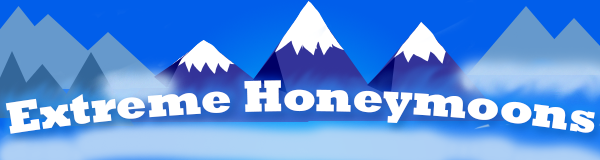
<style>
.page{position:relative;width:600px;height:160px}
.page>*{position:absolute;margin:0}
.t1{font:44.3px "Rockwell-ExtraBold";color:#ffffff}
</style>
<div class="page">
<p class="t1" style="left:5px;top:80px;width:590px;height:54px">Extreme Honeymoons</p>
</div>
